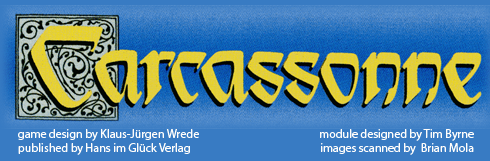
<style>
.page{position:relative;width:490px;height:161px}
.page>*{position:absolute;margin:0}
.t1{font:12px "MyriadPro-Regular";color:#fffefc}
</style>
<div class="page">
<p class="t1" style="left:18px;top:129px;width:181px;height:26px">game design by Klaus-Jürgen Wrede<br>published by Hans im Glück Verlag</p>
<p class="t1" style="left:320px;top:129px;width:154px;height:26px;text-align:right">module designed by Tim Byrne<br>images scanned by  Brian Mola</p>
</div>
